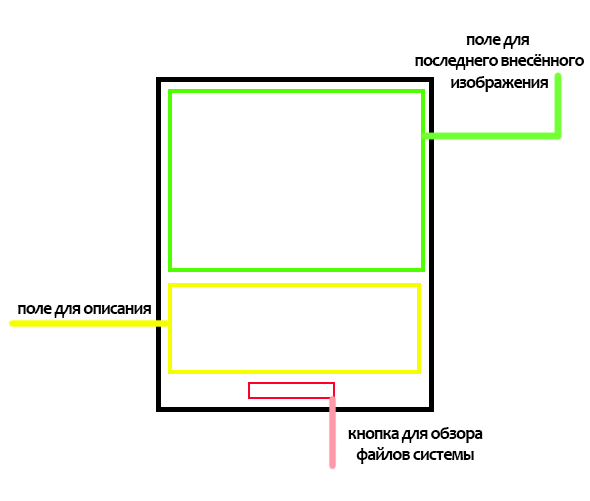
<style>
.page{position:relative;width:590px;height:501px;background:#ffffff}
.page>*{position:absolute;margin:0}
.t1{font:18px "Candara-Bold";letter-spacing:-0.05em;color:#000000}
</style>
<div class="page">
<p class="t1" style="left:415px;top:36px;width:170px;height:56px;text-align:center">поле для <br>последнего внесённого<br>изображения</p>
<p class="t1" style="left:18px;top:305px;width:133px;height:13px">поле для описания</p>
<p class="t1" style="left:348px;top:427px;width:135px;height:37px;text-align:center">кнопка для обзора<br>файлов системы</p>
</div>
